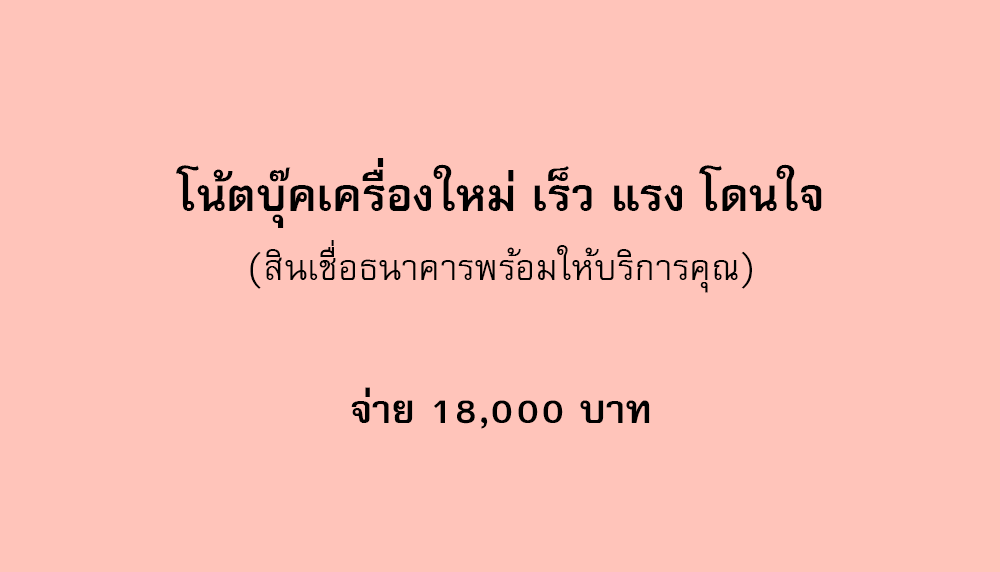
<style>
.page{position:relative;width:1000px;height:572px;background:#ffc4ba}
.page>*{position:absolute;margin:0}
.t1{font:64px "FreesiaUPCBold";color:#000000}
.t2{font:50px "FreesiaUPC";color:#000000}
.t3{font:56px "FreesiaUPCBold";color:#000000}
</style>
<div class="page">
<p class="t1" style="left:176px;top:158px;width:646px;height:70px">โน้ตบุ๊คเครื่องใหม่ เร็ว แรง โดนใจ</p>
<p class="t2" style="left:250px;top:240px;width:502px;height:53px">(สินเชื่อธนาคารพร้อมให้บริการคุณ)</p>
<p class="t3" style="left:351px;top:387px;width:299px;height:42px">จ่าย 18,000 บาท</p>
</div>
